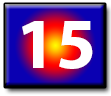
<style>
.page{position:relative;width:111px;height:96px}
.page>*{position:absolute;margin:0}
.t1{font:72px "MyriadPro-Bold";color:#ffffff}
</style>
<div class="page">
<p class="t1" style="left:22px;top:21px;width:71px;height:48px">15</p>
</div>
